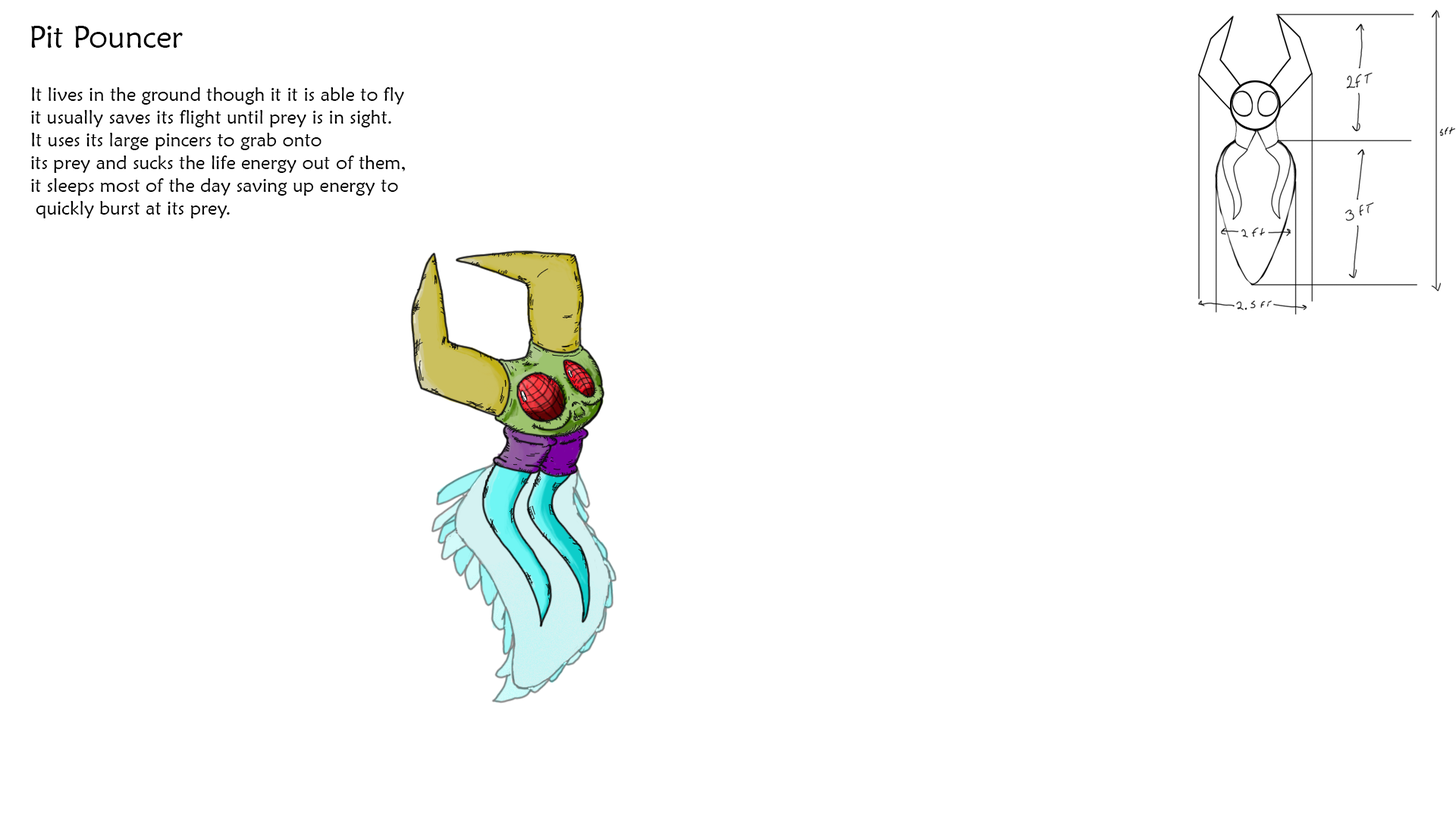
<style>
.page{position:relative;width:1456px;height:819px;background:#ffffff}
.page>*{position:absolute;margin:0}
.t1{font:31.6px "MaiandraGD-Regular";color:#000000}
.t2{font:19px "MaiandraGD-Regular";color:#000000}
</style>
<div class="page">
<p class="t1" style="left:31px;top:26px;width:152px;height:22px">Pit Pouncer</p>
<p class="t2" style="left:31px;top:87px;width:374px;height:131px">It lives in the ground though it it is able to fly <br>it usually saves its flight until prey is in sight.<br>It uses its large pincers to grab onto <br>its prey and sucks the life energy out of them,<br>it sleeps most of the day saving up energy to<br> quickly burst at its prey.</p>
</div>
